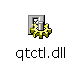
<style>
.page{position:relative;width:80px;height:80px;background:#ffffff}
.page>*{position:absolute;margin:0}
.t1{font:14px "MSReferenceSansSerif";color:#000000}
</style>
<div class="page">
<p class="t1" style="left:16px;top:47px;width:49px;height:14px">qtctl.dll</p>
</div>
